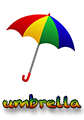
<style>
.page{position:relative;width:84px;height:120px;background:#ffffff}
.page>*{position:absolute;margin:0}
.t1{font:13.2px "Chalkduster";scale:1.19 1}
</style>
<div class="page">
<p class="t1" style="left:3px;top:94px;width:78px;height:14px">umbrella</p>
</div>
